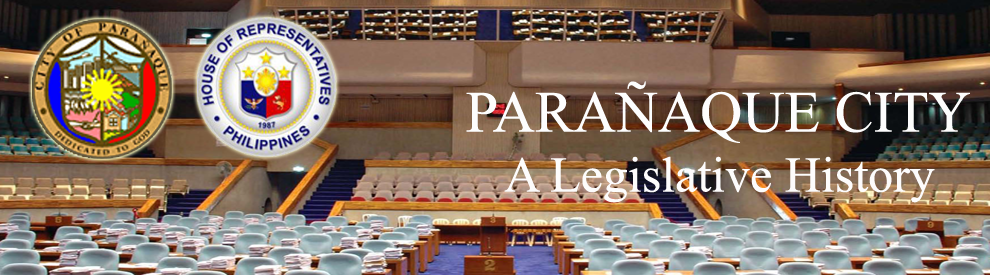
<style>
.page{position:relative;width:990px;height:275px}
.page>*{position:absolute;margin:0}
.t1{font:50px "TimesNewRomanPSMT";color:#fdfcfc}
.t2{font:58.3px "TimesNewRomanPSMT";color:#fdfdfd}
</style>
<div class="page">
<p class="t1" style="left:466px;top:81px;width:504px;height:122px;text-align:center"><span class="t2">PARAÑAQUE CITY<br></span>A Legislative History</p>
</div>
